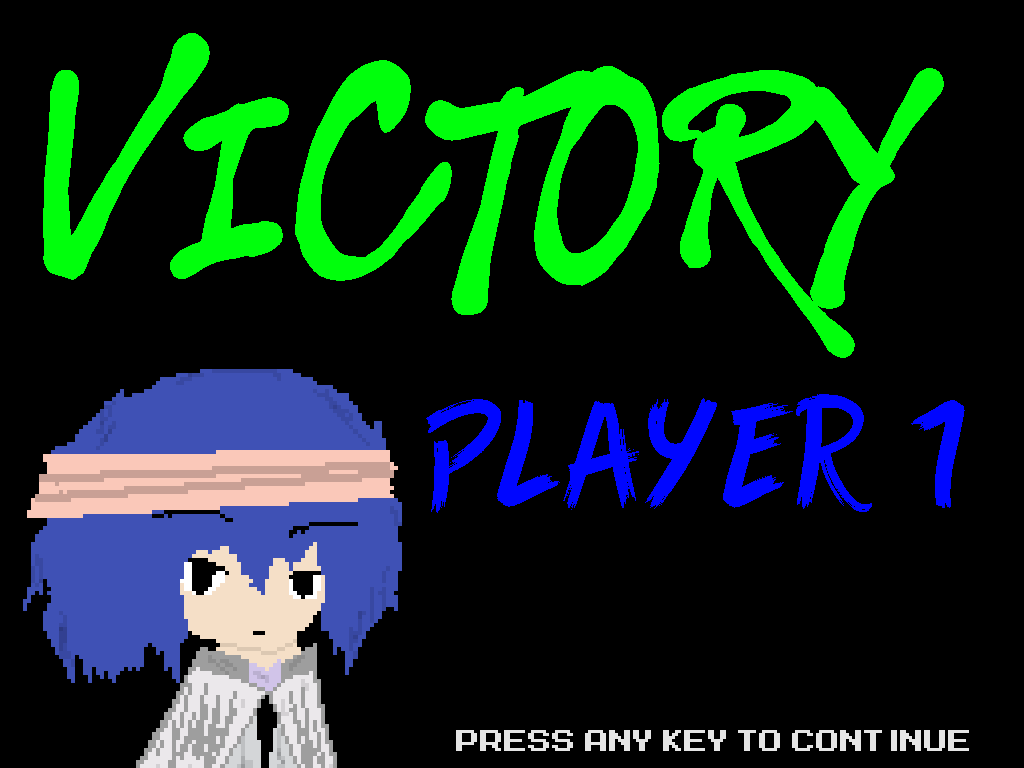
<style>
.page{position:relative;width:1024px;height:768px;background:#000000}
.page>*{position:absolute;margin:0}
.t1{font:267.8px "MonsterGame";color:#00ff0c}
.t2{font:63.1px/31.2px "GameofBrush";color:#0006ff}
.t3{font:24px "MegaMan-2";color:#e5e5e5}
</style>
<div class="page">
<p class="t1" style="left:43px;top:33px;width:901px;height:325px">VICTORY</p>
<p class="t2" style="left:426px;top:394px;width:539px;height:119px">PLAYER 1</p>
<p class="t3" style="left:456px;top:730px;width:513px;height:21px">Press Any Key To continue</p>
</div>
